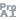
<style>
.page{position:relative;width:20px;height:20px;background:#ffffff}
.page>*{position:absolute;margin:0}
.t1{font:9px "Bahnschrift-SemiBold";color:#929da6;scale:1.2 1}
.t2{font:7.7px "Sarasa-Mono-SC-Regular";color:#929da6;font-weight:bold;scale:2.16 1}
</style>
<div class="page">
<p class="t1" style="left:0px;top:3px;width:17px;height:8px">Pro</p>
<p class="t1" style="left:0px;top:3px;width:17px;height:8px">Pro</p>
<p class="t2" style="left:0px;top:10px;width:17px;height:7px">AI</p>
<p class="t2" style="left:0px;top:10px;width:17px;height:7px">AI</p>
</div>
